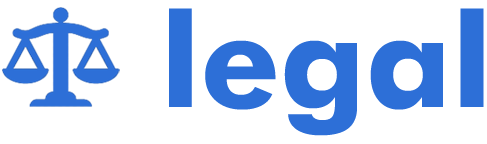
<style>
.page{position:relative;width:487px;height:144px;background:#ffffff}
.page>*{position:absolute;margin:0}
.t1{font:130px "FuturaBT-Bold";color:#2d6fd7}
</style>
<div class="page">
<p class="t1" style="left:169px;top:8px;width:315px;height:128px">legal</p>
</div>
